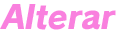
<style>
.page{position:relative;width:116px;height:34px;background:#ffffff}
.page>*{position:absolute;margin:0}
.t1{font:32px "RodinPro-EB";letter-spacing:-0.015em;color:#f980de;font-style:italic}
</style>
<div class="page">
<p class="t1" style="left:0px;top:4px;width:116px;height:26px">Alterar</p>
</div>
